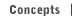
<style>
.page{position:relative;width:72px;height:20px;background:#ffffff}
.page>*{position:absolute;margin:0}
.t1{font:12px "BellGothicBT-Black";letter-spacing:0.02em;color:#4c4c4c}
.t2{font:12px "BellGothicBT-Black";letter-spacing:0.02em}
</style>
<div class="page">
<p class="t1" style="left:10px;top:5px;width:50px;height:11px">Concepts</p>
<p class="t2" style="left:71px;top:3px;width:2px;height:13px">|</p>
</div>
